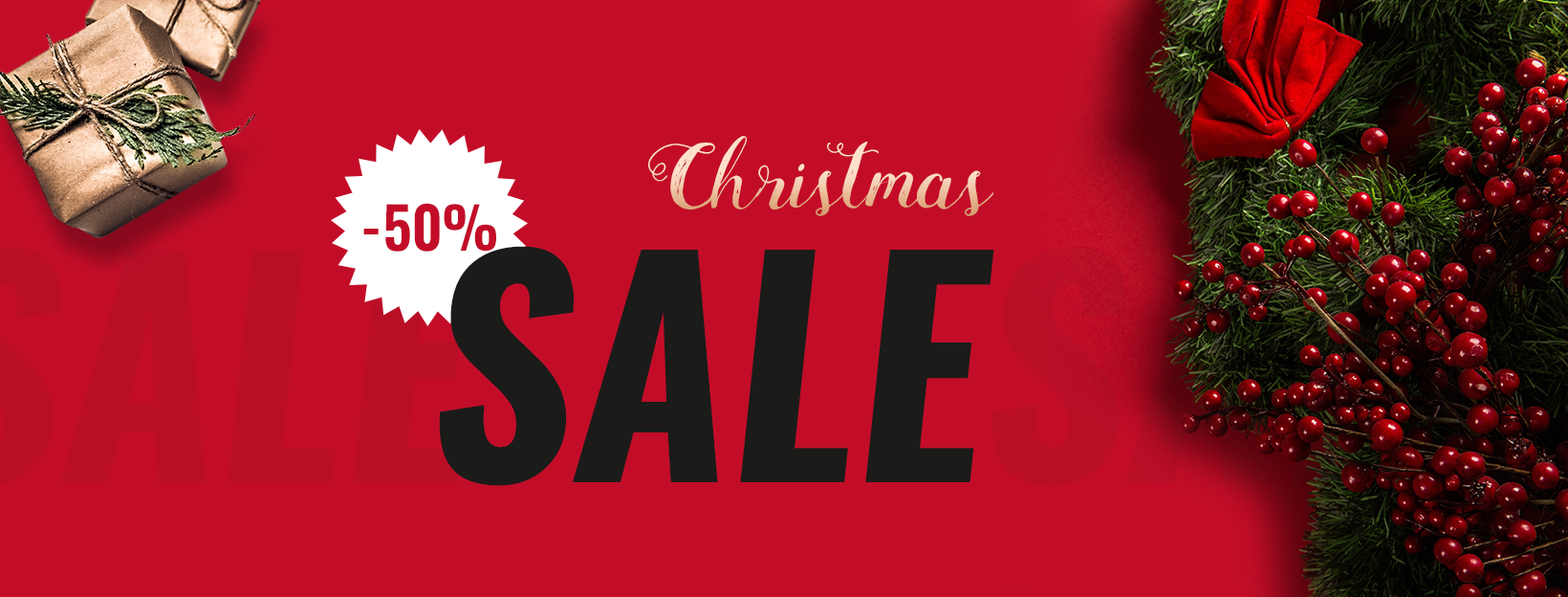
<style>
.page{position:relative;width:1568px;height:597px;background:#c30d28}
.page>*{position:absolute;margin:0}
.t1{font:95.6px "MightypeScript"}
.t2{font:57.4px "Oswald-DemiBold";color:#c30d28}
.t3{font:286.8px "Oswald-BoldItalic";color:#1b1b1a}
</style>
<div class="page">
<p class="t1" style="left:648px;top:136px;width:345px;height:80px">Christmas</p>
<p class="t2" style="left:363px;top:203px;width:133px;height:48px">-50%</p>
<p class="t3" style="left:439px;top:246px;width:555px;height:240px">SALE</p>
</div>
